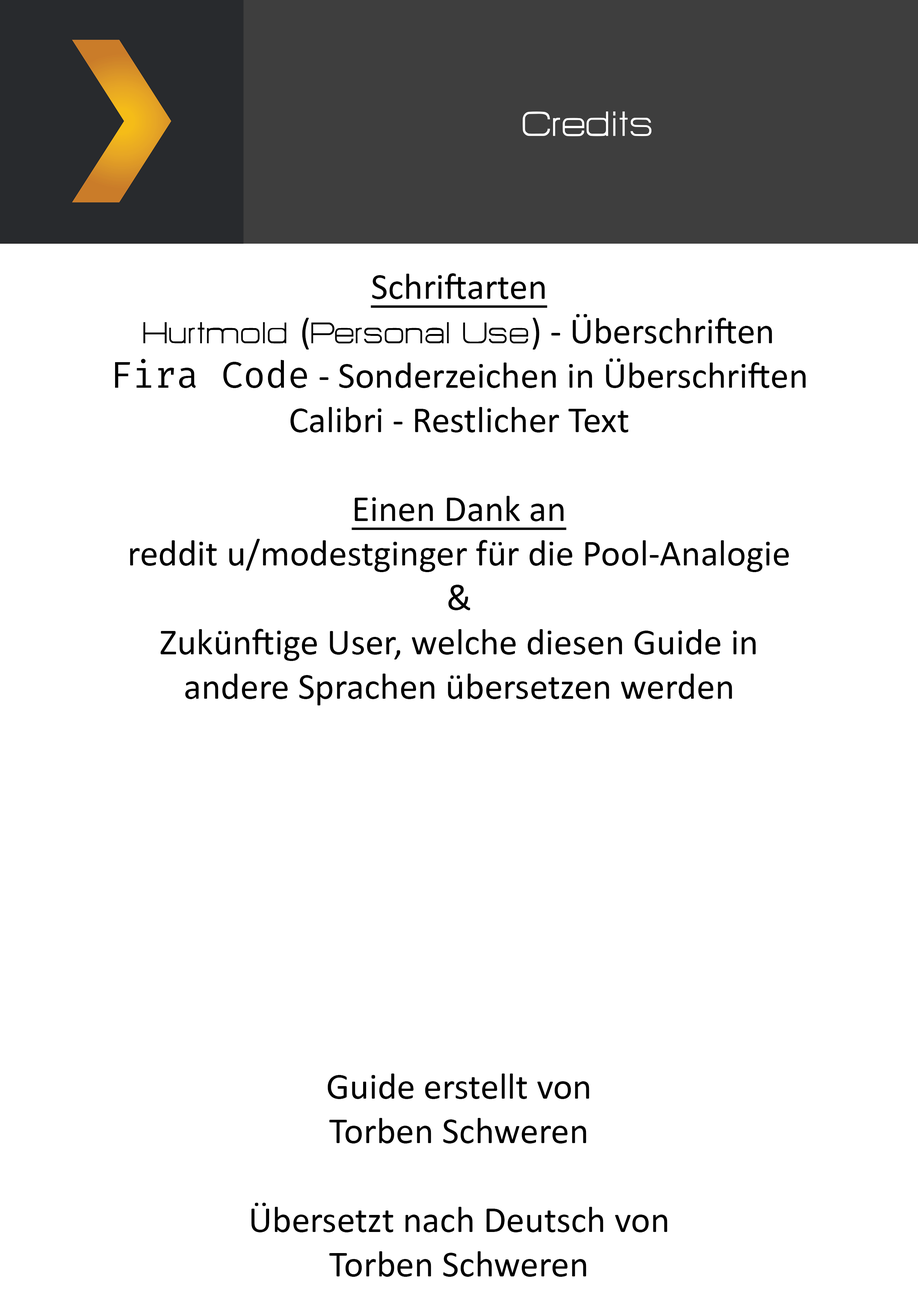
<style>
.page{position:relative;width:918px;height:1299px;background:#ffffff}
.page>*{position:absolute;margin:0}
.t1{font:43.2px "HURTMOLDPersonalUse-Regular";color:#ffffff}
.t2{font:37px "Calibri";color:#000000}
.t3{font:37px "Calibri";color:#000000;text-decoration:underline}
.t4{font:37px "HURTMOLDPersonalUse-Regular";color:#000000}
.t5{font:37px "FiraCode-Regular";color:#000000}
</style>
<div class="page">
<p class="t1" style="left:523px;top:111px;width:129px;height:25px">Credits</p>
<p class="t2" style="left:115px;top:273px;width:691px;height:1004px;text-align:center"><span class="t3">Schriftarten<br></span><span class="t4">Hurtmold </span>(<span class="t4">Personal Use</span>) - Überschriften<br><span class="t5">Fira Code</span> - Sonderzeichen in Überschriften<br>Calibri - Restlicher Text<br><br><span class="t3">Einen Dank an<br></span>reddit u/modestginger für die Pool-Analogie<br>&amp;<br>Zukünftige User, welche diesen Guide in<br>andere Sprachen übersetzen werden<br><br><br><br><br><br><br><br><br>Guide erstellt von<br>Torben Schweren<br><br>Übersetzt nach Deutsch von<br>Torben Schweren</p>
</div>
